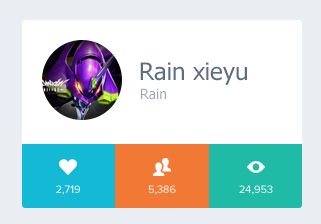
<style>
.page{position:relative;width:321px;height:224px;background:#ffffff}
.page>*{position:absolute;margin:0}
.t1{font:24px "Tahoma";color:#5e6d81}
.t2{font:14px "Tahoma";color:#9ea7b3}
.t3{font:18px "SSStandard";color:#ffffff}
.t4{font:11px "ProximaNova-Regular";color:#ffffff;text-transform:uppercase}
</style>
<div class="page">
<p class="t1" style="left:140px;top:62px;width:107px;height:23px">Rain xieyu</p>
<p class="t2" style="left:141px;top:88px;width:25px;height:12px">Rain</p>
<p class="t3" style="left:59px;top:159px;width:18px;height:16px">♥</p>
<p class="t4" style="left:56px;top:185px;width:24px;height:10px">2,719</p>
<p class="t4" style="left:148px;top:185px;width:28px;height:10px">5,386</p>
<p class="t4" style="left:239px;top:185px;width:34px;height:10px">24,953</p>
</div>
